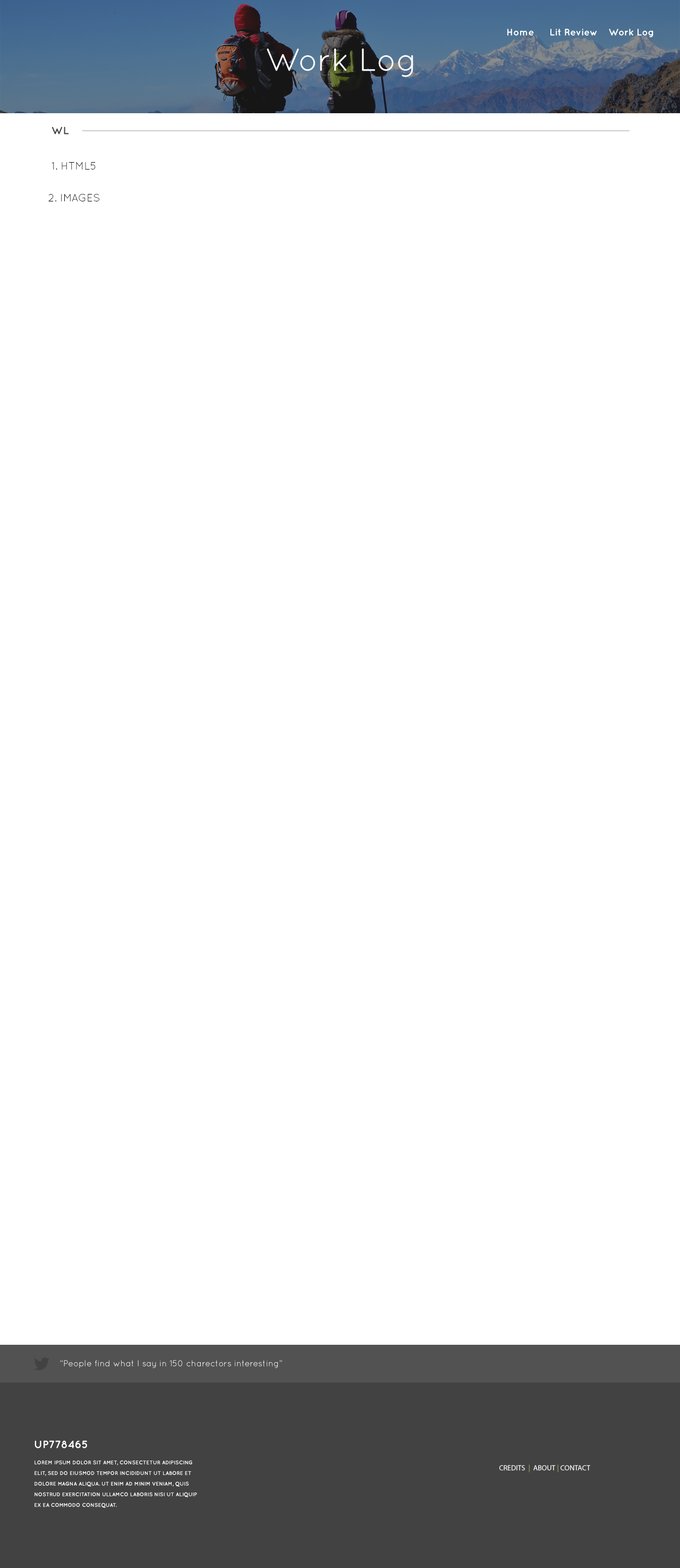
<style>
.page{position:relative;width:680px;height:1568px;background:#ffffff}
.page>*{position:absolute;margin:0}
.t1{font:9.6px "Quicksand-Bold";color:#ffffff}
.t2{font:31.9px "Quicksand-Regular";color:#ffffff}
.t3{font:10.6px "Quicksand-Bold";color:#424242;text-transform:uppercase}
.t4{font:10.6px "Quicksand-Regular";color:#000000}
.t5{font:8.5px "Quicksand-Regular";color:#ffffff}
.t6{font:10.6px "Quicksand-Bold";color:#ffffff;text-transform:uppercase}
.t7{font:5.3px/10.6px "QuicksandBold-Regular";color:#ffffff;text-transform:uppercase}
.t8{font:7.4px "MyriadPro-Regular";color:#ffffff;text-transform:uppercase}
.t9{font:7.4px "MyriadPro-Regular";color:#aa9b77;text-transform:uppercase}
</style>
<div class="page">
<p class="t1" style="left:508px;top:29px;width:26px;height:7px">Home</p>
<p class="t1" style="left:551px;top:29px;width:46px;height:7px">Lit Review</p>
<p class="t1" style="left:609px;top:29px;width:45px;height:8px">Work Log</p>
<p class="t2" style="left:267px;top:48px;width:147px;height:29px">Work Log</p>
<p class="t3" style="left:52px;top:127px;width:17px;height:7px">WL</p>
<p class="t4" style="left:52px;top:162px;width:44px;height:8px">1. HTML5</p>
<p class="t4" style="left:48px;top:193px;width:51px;height:8px">2. IMAGES</p>
<p class="t5" style="left:60px;top:1360px;width:222px;height:8px">“People find what I say in 150 charectors interesting”</p>
<p class="t6" style="left:35px;top:1440px;width:52px;height:8px">UP778465</p>
<p class="t7" style="left:35px;top:1460px;width:162px;height:48px">Lorem ipsum dolor sit amet, consectetur adipiscing elit, sed do eiusmod tempor incididunt ut labore et dolore magna aliqua. Ut enim ad minim veniam, quis nostrud exercitation ullamco laboris nisi ut aliquip ex ea commodo consequat.</p>
<p class="t8" style="left:500px;top:1464px;width:91px;height:8px">credits  <span class="t9">|  </span>about <span class="t9">| </span>contact</p>
</div>
